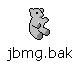
<style>
.page{position:relative;width:80px;height:80px;background:#ffffff}
.page>*{position:absolute;margin:0}
.t1{font:14px "MSReferenceSansSerif";color:#000000}
</style>
<div class="page">
<p class="t1" style="left:7px;top:47px;width:65px;height:14px">jbmg.bak</p>
</div>
